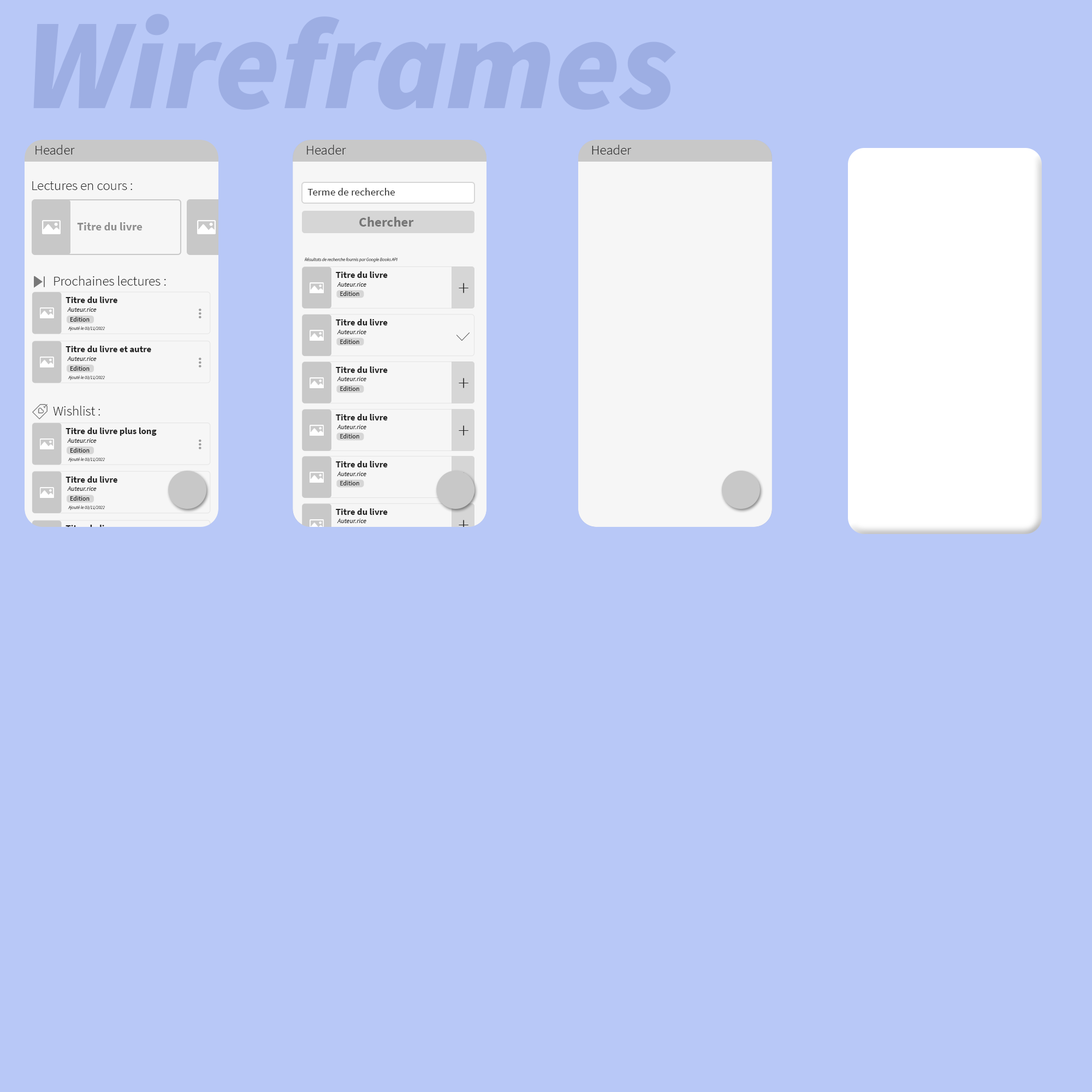
<style>
.page{position:relative;width:1092px;height:1092px;background:#b8c8f7}
.page>*{position:absolute;margin:0}
.t1{font:129.2px "SourceSansPro-BlackIt";color:#899cd5}
.t2{font:13.6px "SourceSansPro-Light";color:#212121}
.t3{font:10.6px "SourceSansPro-Regular";color:#212121}
.t4{font:13.6px "SourceSansPro-Bold";color:#767676}
.t5{font:11.5px "SourceSansPro-Bold";color:#8f8f8f}
.t6{font:4.5px "SourceSansPro-LightIt";color:#212121}
.t7{font:9.1px "SourceSansPro-Bold";color:#212121}
.t8{font:6.5px "SourceSansPro-It";color:#212121}
.t9{font:6.5px "SourceSansPro-Regular";color:#212121}
.t10{font:22.8px "SourceSansPro-Light";color:#212121}
.t11{font:9.2px "SourceSansPro-Bold";color:#212121}
.t12{font:6.6px "SourceSansPro-It";color:#212121}
.t13{font:6.6px "SourceSansPro-Regular";color:#212121}
.t14{font:22.7px "SourceSansPro-Light";color:#212121}
.t15{font:9.2px "SourceSansPro-Bold";color:#b8c8f7}
</style>
<div class="page">
<p class="t1" style="left:33px;top:14px;width:643px;height:96px;opacity:0.6">Wireframes</p>
<p class="t2" style="left:35px;top:145px;width:40px;height:10px">Header</p>
<p class="t2" style="left:307px;top:145px;width:39px;height:10px">Header</p>
<p class="t2" style="left:592px;top:145px;width:40px;height:10px">Header</p>
<p class="t2" style="left:32px;top:181px;width:100px;height:9px">Lectures en cours :</p>
<p class="t3" style="left:307px;top:188px;width:88px;height:7px">Terme de recherche</p>
<p class="t4" style="left:359px;top:217px;width:55px;height:10px">Chercher</p>
<p class="t5" style="left:77px;top:222px;width:66px;height:8px">Titre du livre</p>
<p class="t6" style="left:305px;top:257px;width:92px;height:5px">Résultats de recherche fournis par Google Books API</p>
<p class="t2" style="left:54px;top:276px;width:112px;height:10px">Prochaines lectures :</p>
<p class="t7" style="left:336px;top:271px;width:52px;height:7px">Titre du livre</p>
<p class="t8" style="left:337px;top:282px;width:29px;height:5px">Auteur.rice</p>
<p class="t9" style="left:340px;top:291px;width:19px;height:5px">Edition</p>
<p class="t10" style="left:459px;top:283px;width:9px;height:10px">+</p>
<p class="t11" style="left:66px;top:296px;width:51px;height:7px">Titre du livre</p>
<p class="t12" style="left:67px;top:307px;width:30px;height:5px">Auteur.rice</p>
<p class="t13" style="left:70px;top:317px;width:20px;height:5px">Edition</p>
<p class="t6" style="left:68px;top:326px;width:37px;height:5px">Ajouté le 03/11/2022</p>
<p class="t7" style="left:336px;top:319px;width:52px;height:6px">Titre du livre</p>
<p class="t8" style="left:337px;top:330px;width:29px;height:4px">Auteur.rice</p>
<p class="t9" style="left:340px;top:339px;width:19px;height:5px">Edition</p>
<p class="t11" style="left:66px;top:346px;width:85px;height:6px">Titre du livre et autre</p>
<p class="t12" style="left:67px;top:357px;width:30px;height:4px">Auteur.rice</p>
<p class="t13" style="left:70px;top:366px;width:20px;height:5px">Edition</p>
<p class="t6" style="left:68px;top:375px;width:37px;height:5px">Ajouté le 03/11/2022</p>
<p class="t7" style="left:336px;top:366px;width:52px;height:7px">Titre du livre</p>
<p class="t8" style="left:337px;top:377px;width:29px;height:4px">Auteur.rice</p>
<p class="t14" style="left:459px;top:378px;width:9px;height:10px">+</p>
<p class="t9" style="left:340px;top:386px;width:19px;height:5px">Edition</p>
<p class="t2" style="left:53px;top:406px;width:47px;height:10px">Wishlist :</p>
<p class="t7" style="left:336px;top:414px;width:52px;height:6px">Titre du livre</p>
<p class="t8" style="left:337px;top:425px;width:29px;height:4px">Auteur.rice</p>
<p class="t14" style="left:459px;top:425px;width:9px;height:11px">+</p>
<p class="t11" style="left:66px;top:428px;width:91px;height:8px">Titre du livre plus long</p>
<p class="t9" style="left:340px;top:434px;width:19px;height:4px">Edition</p>
<p class="t12" style="left:67px;top:438px;width:30px;height:5px">Auteur.rice</p>
<p class="t13" style="left:70px;top:448px;width:20px;height:5px">Edition</p>
<p class="t6" style="left:68px;top:457px;width:37px;height:5px">Ajouté le 03/11/2022</p>
<p class="t7" style="left:336px;top:461px;width:52px;height:6px">Titre du livre</p>
<p class="t8" style="left:337px;top:472px;width:29px;height:4px">Auteur.rice</p>
<p class="t11" style="left:66px;top:476px;width:51px;height:7px">Titre du livre</p>
<p class="t9" style="left:340px;top:480px;width:19px;height:5px">Edition</p>
<p class="t12" style="left:67px;top:486px;width:30px;height:5px">Auteur.rice</p>
<p class="t13" style="left:70px;top:496px;width:20px;height:5px">Edition</p>
<p class="t6" style="left:68px;top:505px;width:37px;height:5px">Ajouté le 03/11/2022</p>
<p class="t7" style="left:336px;top:508px;width:52px;height:7px">Titre du livre</p>
<p class="t8" style="left:337px;top:519px;width:29px;height:4px">Auteur.rice</p>
<p class="t14" style="left:459px;top:520px;width:9px;height:10px">+</p>
<p class="t15" style="left:66px;top:525px;width:51px;height:6px">Titre du livre</p>
</div>
